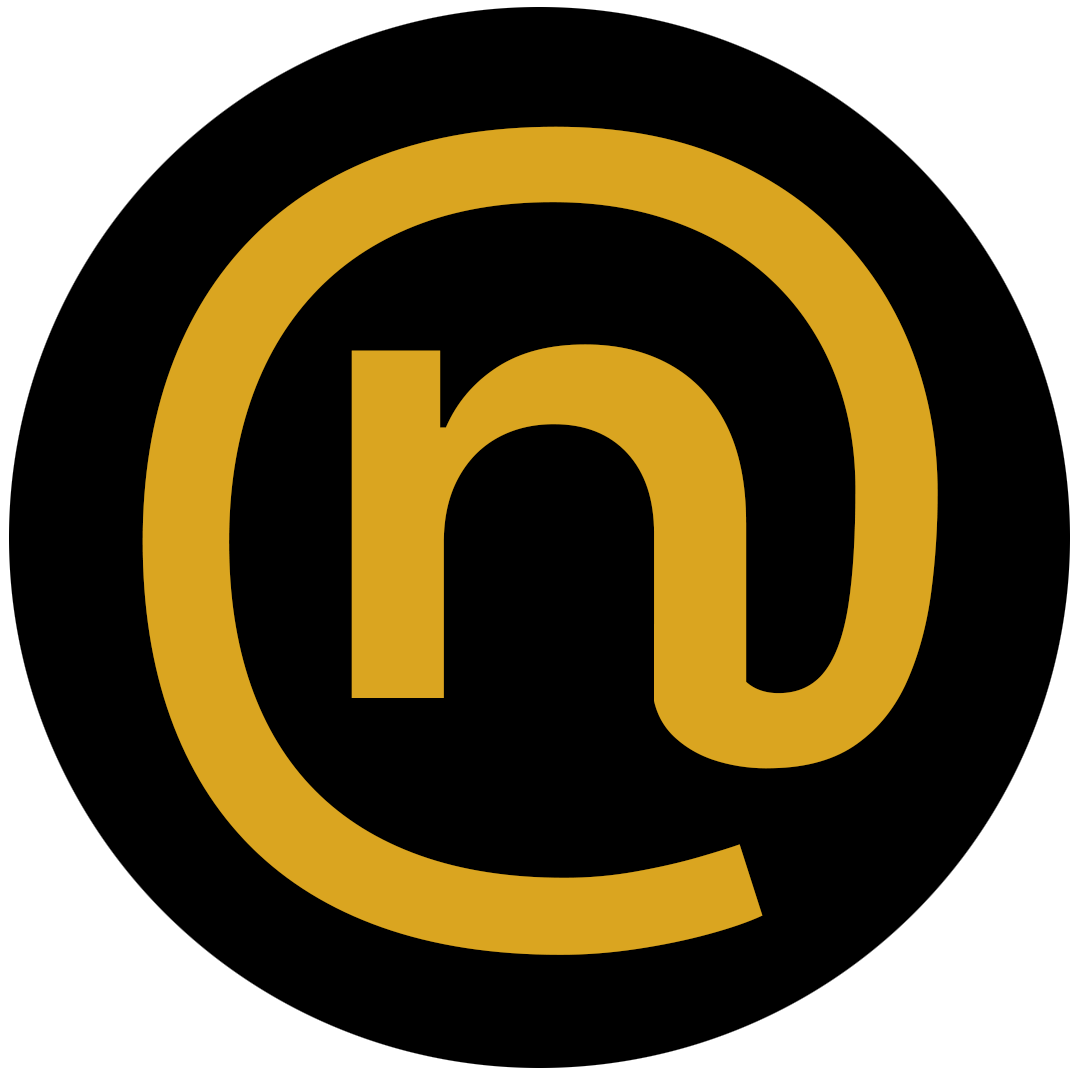
<style>
.page{position:relative;width:1080px;height:1080px;background:#000000}
.page>*{position:absolute;margin:0}
.t1{font:914px "Inter-Medium";color:#daa520}
.t2{font:866px "Inter-Medium";color:#daa520}
</style>
<div class="page">
<p class="t1" style="left:142px;top:126px;width:796px;height:829px">@</p>
<p class="t2" style="left:351px;top:344px;width:396px;height:479px">n</p>
</div>
